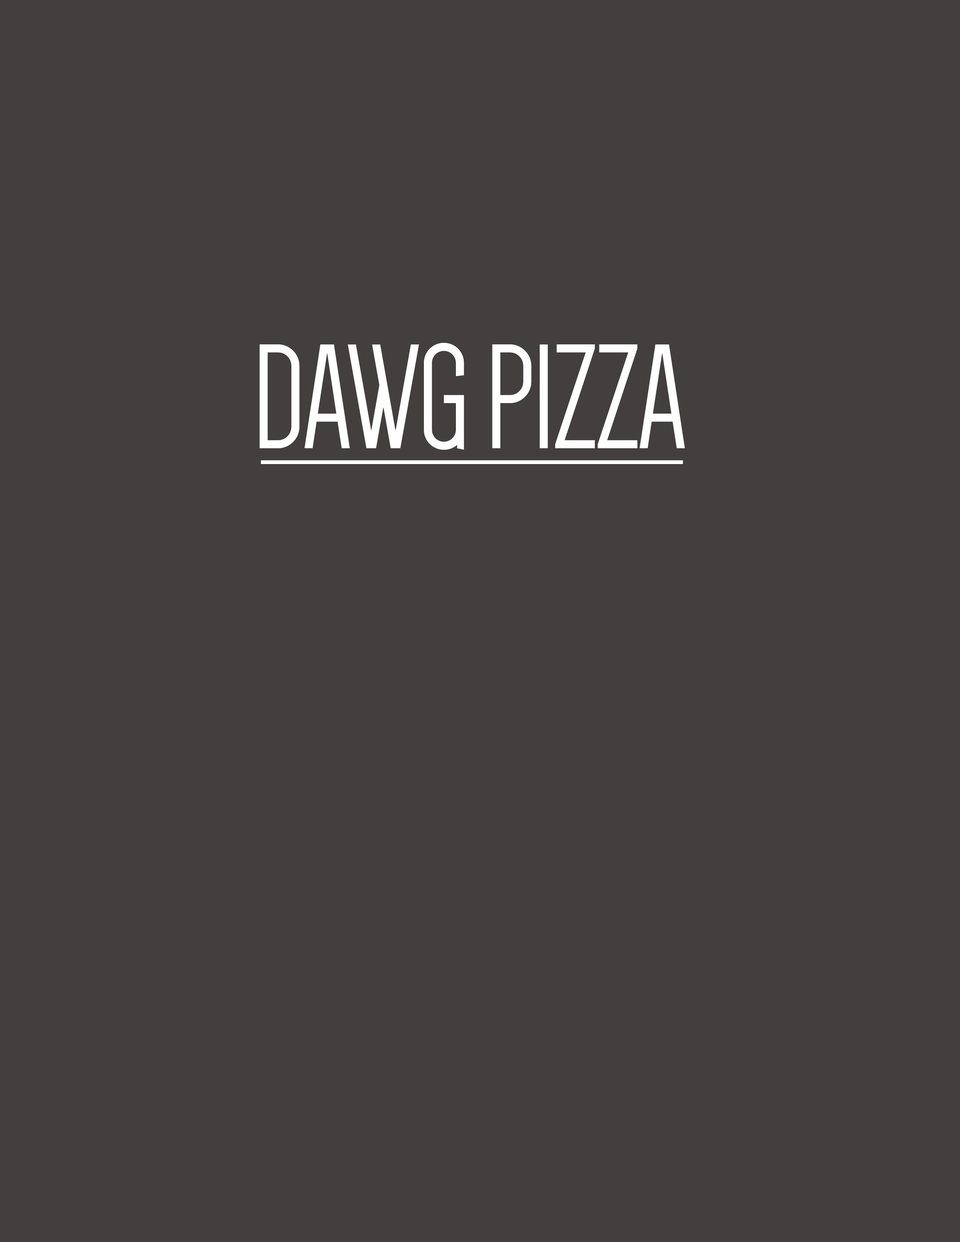
<style>
.page{position:relative;width:960px;height:1242px;background:#433f3f}
.page>*{position:absolute;margin:0}
.t1{font:153.7px "Dense-Regular";letter-spacing:-0.02em;color:#ffffff}
</style>
<div class="page">
<p class="t1" style="left:259px;top:343px;width:426px;height:107px">DAWG PIZZA</p>
</div>
